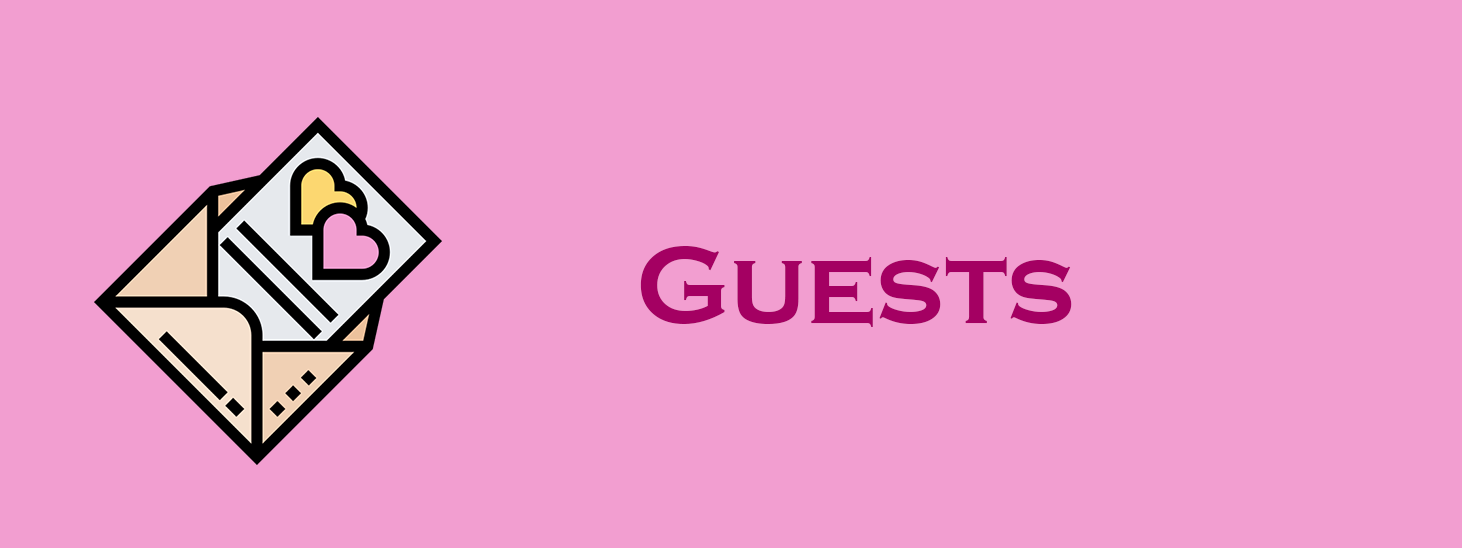
<style>
.page{position:relative;width:1462px;height:549px;background:#f29ed0}
.page>*{position:absolute;margin:0}
.t1{font:113.5px "CopperplateGothic-Bold";color:#a40062;scale:0.97 1}
</style>
<div class="page">
<p class="t1" style="left:640px;top:246px;width:432px;height:81px">Guests</p>
</div>
